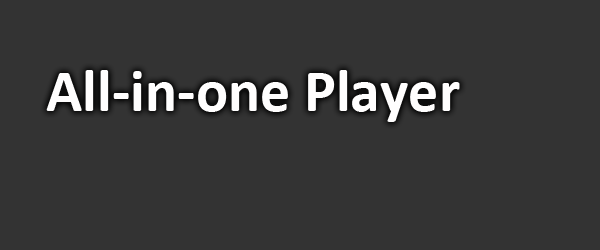
<style>
.page{position:relative;width:600px;height:250px;background:#333333}
.page>*{position:absolute;margin:0}
.t1{font:60px "Calibri-Bold";color:#fffefe}
</style>
<div class="page">
<p class="t1" style="left:46px;top:70px;width:414px;height:52px">All-in-one Player</p>
</div>
